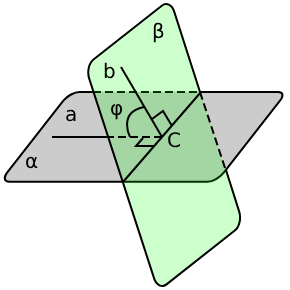
<style>
.page{position:relative;width:290px;height:290px;background:#ffffff}
.page>*{position:absolute;margin:0}
.t1{font:20px "DejaVuSans";color:#000000}
</style>
<div class="page">
<p class="t1" style="left:153px;top:22px;width:11px;height:21px">β</p>
<p class="t1" style="left:104px;top:62px;width:11px;height:17px">b</p>
<p class="t1" style="left:66px;top:109px;width:10px;height:13px">a</p>
<p class="t1" style="left:111px;top:103px;width:12px;height:17px">φ</p>
<p class="t1" style="left:168px;top:132px;width:12px;height:16px">C</p>
<p class="t1" style="left:26px;top:156px;width:12px;height:13px">α</p>
</div>
